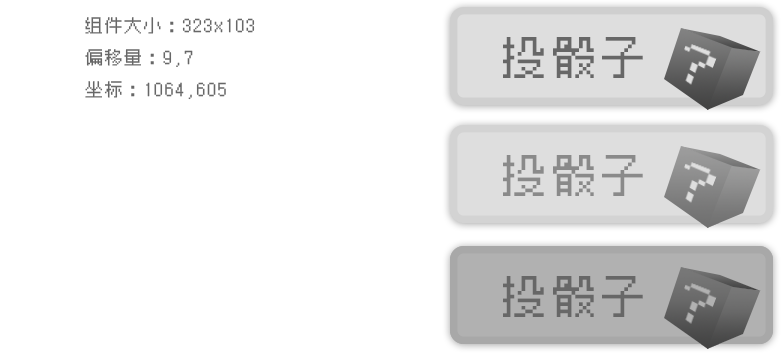
<style>
.page{position:relative;width:782px;height:354px;background:#ffffff}
.page>*{position:absolute;margin:0}
.t1{font:17.7px/31.8px "Zpix";color:#676767}
.t2{font:44.8px "Zpix";color:#676767}
.t3{font:44.8px "Zpix";color:#8a8a8a}
</style>
<div class="page">
<p class="t1" style="left:85px;top:17px;width:170px;height:83px">组件大小：323x103<br>偏移量：9,7<br>坐标：1064,605</p>
<p class="t2" style="left:503px;top:37px;width:140px;height:41px">投骰子</p>
<p class="t3" style="left:503px;top:155px;width:140px;height:41px">投骰子</p>
<p class="t2" style="left:503px;top:276px;width:140px;height:41px">投骰子</p>
</div>
